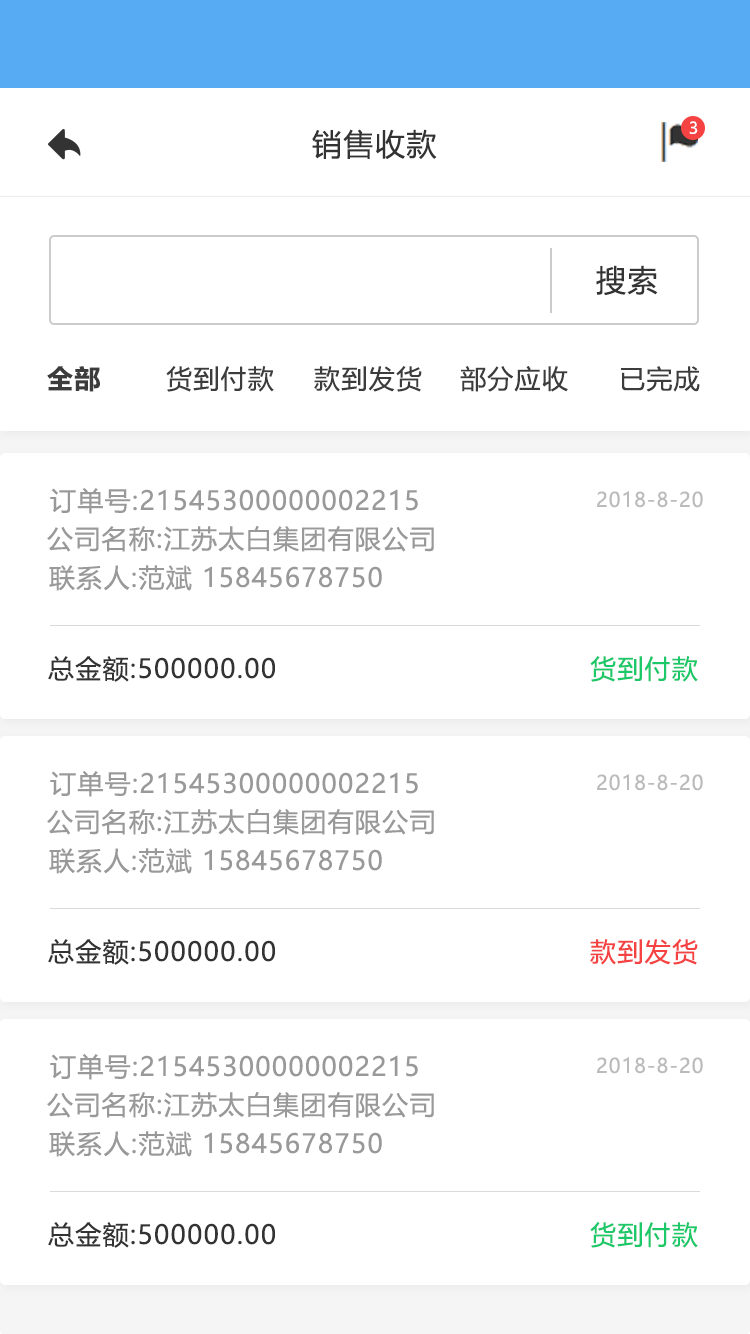
<style>
.page{position:relative;width:750px;height:1334px;background:#ffffff}
.page>*{position:absolute;margin:0}
.t1{font:16px "MicrosoftYaHeiUI";color:#ffffff}
.t2{font:30px "MicrosoftYaHeiUI";letter-spacing:0.05em;color:#333333}
.t3{font:26px "MicrosoftYaHeiUI-Bold";letter-spacing:0.05em;color:#3c3c3c}
.t4{font:26px "MicrosoftYaHeiUI";letter-spacing:0.05em;color:#3c3c3c}
.t5{font:26px "MicrosoftYaHeiUI";letter-spacing:0.05em;color:#999999}
.t6{font:20px "MicrosoftYaHeiUI";letter-spacing:0.05em;color:#bbbbbb}
.t7{font:26px "MicrosoftYaHeiUI";letter-spacing:0.05em;color:#333333}
.t8{font:26px "MicrosoftYaHeiUI";letter-spacing:0.05em;color:#1dc869}
.t9{font:26px "MicrosoftYaHeiUI";letter-spacing:0.05em;color:#f54343}
</style>
<div class="page">
<p class="t1" style="left:689px;top:121px;width:9px;height:13px">3</p>
<p class="t2" style="left:312px;top:129px;width:125px;height:30px">销售收款</p>
<p class="t2" style="left:596px;top:265px;width:62px;height:30px">搜索</p>
<p class="t3" style="left:47px;top:366px;width:53px;height:26px">全部</p>
<p class="t4" style="left:166px;top:366px;width:108px;height:26px">货到付款</p>
<p class="t4" style="left:314px;top:366px;width:108px;height:26px">款到发货</p>
<p class="t4" style="left:460px;top:366px;width:108px;height:26px">部分应收</p>
<p class="t4" style="left:621px;top:366px;width:79px;height:26px">已完成</p>
<p class="t5" style="left:50px;top:488px;width:368px;height:26px">订单号:21545300000002215</p>
<p class="t6" style="left:597px;top:491px;width:106px;height:17px">2018-8-20</p>
<p class="t5" style="left:47px;top:526px;width:387px;height:26px">公司名称:江苏太白集团有限公司</p>
<p class="t5" style="left:49px;top:565px;width:333px;height:26px">联系人:范斌 15845678750</p>
<p class="t7" style="left:48px;top:656px;width:227px;height:26px">总金额:500000.00</p>
<p class="t8" style="left:590px;top:656px;width:108px;height:26px">货到付款</p>
<p class="t5" style="left:50px;top:771px;width:368px;height:26px">订单号:21545300000002215</p>
<p class="t6" style="left:597px;top:774px;width:106px;height:17px">2018-8-20</p>
<p class="t5" style="left:47px;top:809px;width:387px;height:26px">公司名称:江苏太白集团有限公司</p>
<p class="t5" style="left:49px;top:848px;width:333px;height:26px">联系人:范斌 15845678750</p>
<p class="t7" style="left:48px;top:939px;width:227px;height:26px">总金额:500000.00</p>
<p class="t9" style="left:590px;top:939px;width:108px;height:26px">款到发货</p>
<p class="t5" style="left:50px;top:1054px;width:368px;height:26px">订单号:21545300000002215</p>
<p class="t6" style="left:597px;top:1057px;width:106px;height:17px">2018-8-20</p>
<p class="t5" style="left:47px;top:1092px;width:387px;height:26px">公司名称:江苏太白集团有限公司</p>
<p class="t5" style="left:49px;top:1131px;width:333px;height:26px">联系人:范斌 15845678750</p>
<p class="t7" style="left:48px;top:1222px;width:227px;height:26px">总金额:500000.00</p>
<p class="t8" style="left:590px;top:1222px;width:108px;height:26px">货到付款</p>
</div>
